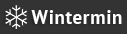
<style>
.page{position:relative;width:127px;height:34px;background:#333333}
.page>*{position:absolute;margin:0}
.t1{font:19.3px "PTSans-Bold";letter-spacing:0.025em;color:#ffffff}
</style>
<div class="page">
<p class="t1" style="left:31px;top:10px;width:91px;height:14px">Wintermin</p>
</div>
